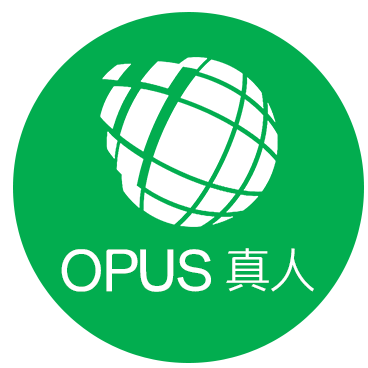
<style>
.page{position:relative;width:368px;height:368px;background:#02ad4f}
.page>*{position:absolute;margin:0}
.t1{font:45px "MFDianHei_Noncommercial-Bold";color:#ffffff}
.t2{font:45px "MFDianHei_Noncommercial-ExLight";color:#ffffff}
</style>
<div class="page">
<p class="t1" style="left:61px;top:248px;width:253px;height:44px">OPUS <span class="t2">真人</span></p>
</div>
